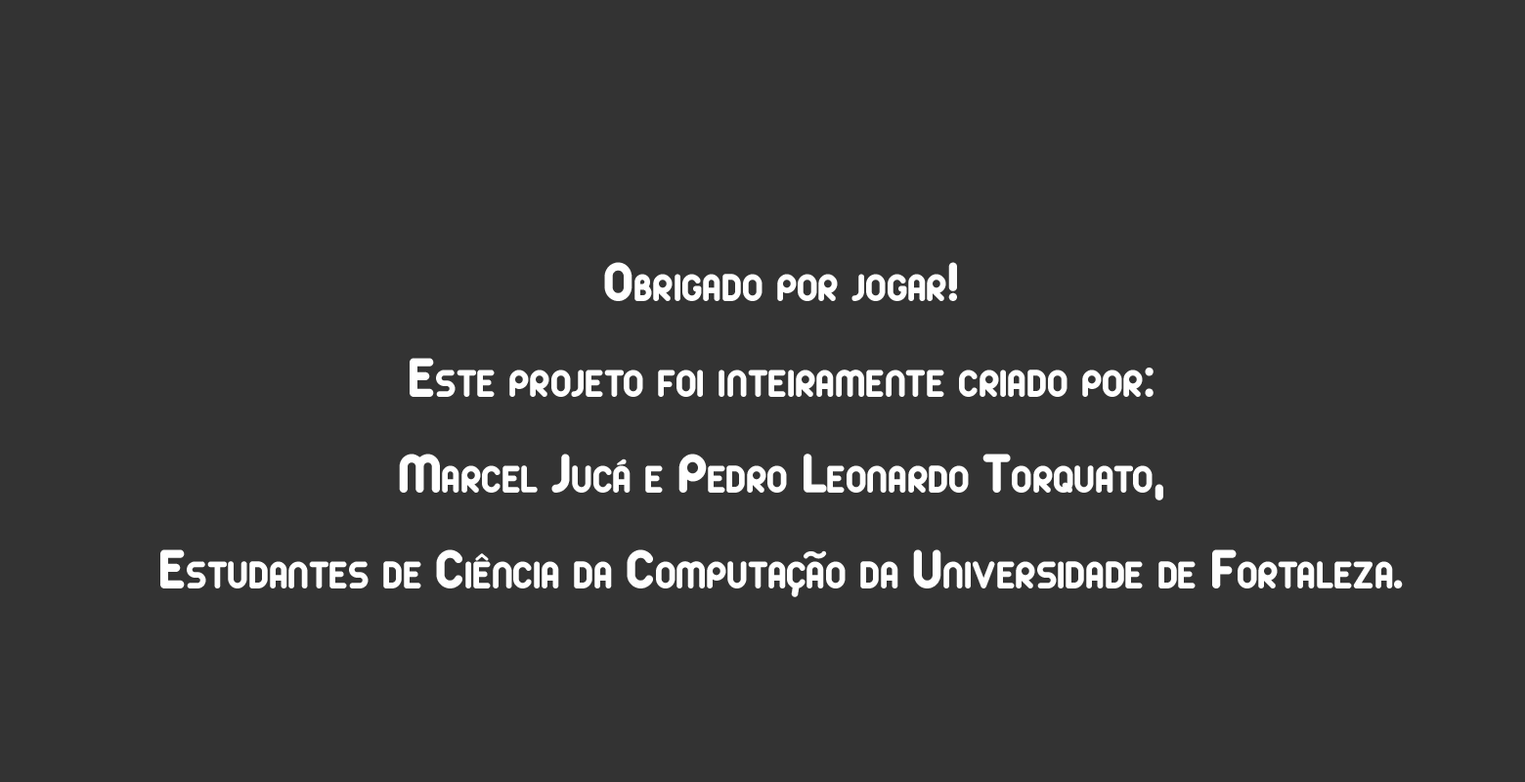
<style>
.page{position:relative;width:1525px;height:782px;background:#333333}
.page>*{position:absolute;margin:0}
.t1{font:60.5px/95.8px "Arista";color:#ffffff;font-variant:small-caps}
.t2{font:60.5px "Arista";color:#ffffff;font-variant:small-caps}
.t3{font:48.4px "Arista";color:#ffffff;font-variant:small-caps}
</style>
<div class="page">
<p class="t1" style="left:160px;top:262px;width:1243px;height:326px;text-align:center">Obrigado por jogar! <br>Este projeto foi inteiramente criado por: <br>Marcel Jucá e Pedro Leonardo Torquato, <br>Estudantes de Ciência da Computacao da Universidade de Fortaleza.</p>
<p class="t2" style="left:803px;top:550px;width:24px;height:9px">~</p>
<p class="t3" style="left:791px;top:585px;width:9px;height:12px;rotate:9deg">,</p>
</div>
